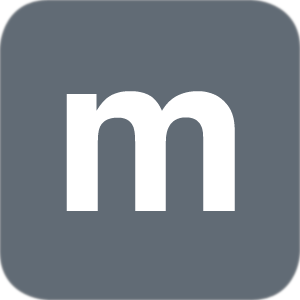
<style>
.page{position:relative;width:300px;height:300px;background:#616b75}
.page>*{position:absolute;margin:0}
.t1{font:220px "Helvetica-Bold";color:#ffffff}
</style>
<div class="page">
<p class="t1" style="left:66px;top:91px;width:169px;height:120px">m</p>
</div>
